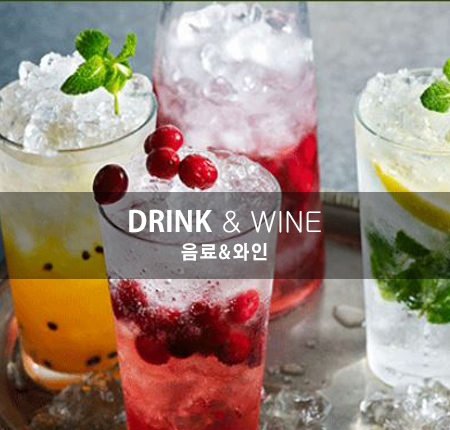
<style>
.page{position:relative;width:450px;height:430px}
.page>*{position:absolute;margin:0}
.t1{font:28.7px/12.1px "Gulim";color:#ffffff}
.t2{font:28.7px/12.1px "AdobeGothicStd-Bold";color:#ffffff}
.t3{font:18.7px/12.1px "AdobeGothicStd-Bold";letter-spacing:0.1em;color:#ffffff;scale:0.91 1}
</style>
<div class="page">
<p class="t1" style="left:129px;top:209px;width:192px;height:52px;text-align:center"><span class="t2">DRINK</span> &amp; WINE<br><span class="t3">음료&amp;와인</span></p>
</div>
